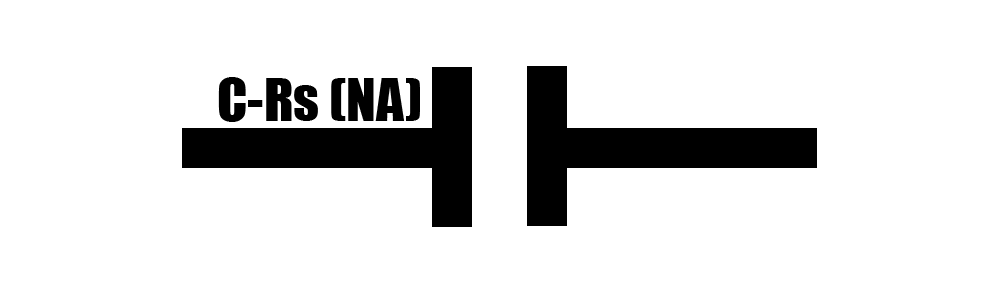
<style>
.page{position:relative;width:1000px;height:300px;background:#ffffff}
.page>*{position:absolute;margin:0}
.t1{font:55px "Impact";color:#000000}
</style>
<div class="page">
<p class="t1" style="left:218px;top:77px;width:202px;height:45px">C-Rs (NA)</p>
</div>
